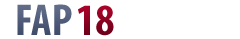
<style>
.page{position:relative;width:240px;height:39px;background:#ffffff}
.page>*{position:absolute;margin:0}
.t1{font:45px "MyriadPro-BoldCond";color:#515d7b}
.t2{font:45px "MyriadPro-BoldCond"}
</style>
<div class="page">
<p class="t1" style="left:17px;top:4px;width:55px;height:31px">FAP</p>
<p class="t2" style="left:78px;top:5px;width:36px;height:31px">18</p>
</div>
